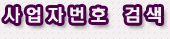
<style>
.page{position:relative;width:170px;height:39px;background:#f4f0f2}
.page>*{position:absolute;margin:0}
.t1{font:18px "ÇÑ¾ç°¡´ÂÇìµå¶óÀÎ";letter-spacing:0.2em;color:#f4f0f2}
</style>
<div class="page">
<p class="t1" style="left:4px;top:7px;width:157px;height:16px">사업자번호 검색</p>
</div>
